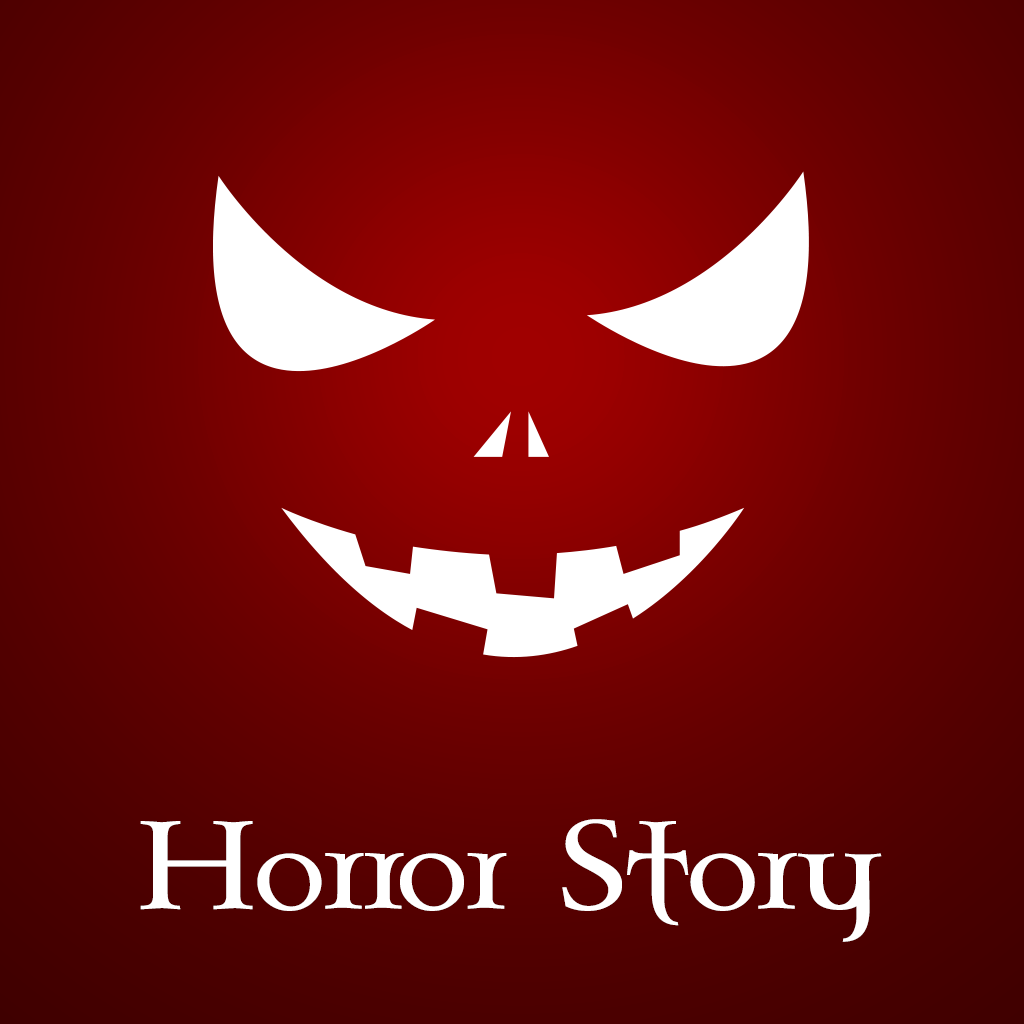
<style>
.page{position:relative;width:1024px;height:1024px}
.page>*{position:absolute;margin:0}
.t1{font:110px "CelticGaramondthe2nd";color:#ffffff}
</style>
<div class="page">
<p class="t1" style="left:140px;top:819px;width:742px;height:123px">Horror Story</p>
</div>
